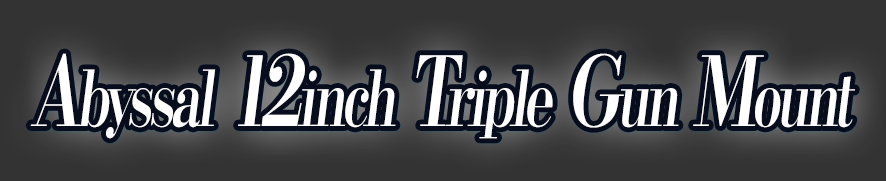
<style>
.page{position:relative;width:886px;height:181px;background:#333333}
.page>*{position:absolute;margin:0}
.t1{font:76.8px "KochoStd-Heavy";letter-spacing:-0.08em;color:#ffffff;font-style:italic;scale:0.71 1}
.t2{font:96px "KochoStd-Heavy";letter-spacing:-0.08em;color:#ffffff;font-style:italic;scale:0.71 1}
</style>
<div class="page">
<p class="t1" style="left:30px;top:53px;width:825px;height:86px"><span class="t2">A</span>byssal<span class="t2"> 12</span>inch<span class="t2"> T</span>riple<span class="t2"> G</span>un<span class="t2"> M</span>ount</p>
</div>
